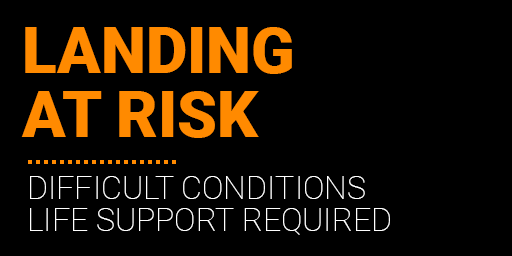
<style>
.page{position:relative;width:512px;height:256px;background:#000000}
.page>*{position:absolute;margin:0}
.t1{font:64px/32px "Roboto-Black";color:#ff8a00;text-transform:uppercase}
.t2{font:32px/32px "Roboto-Thin";color:#ffffff;text-transform:uppercase}
</style>
<div class="page">
<p class="t1" style="left:21px;top:27px;width:271px;height:111px">LANDING<br><br>AT RISK</p>
<p class="t2" style="left:30px;top:176px;width:360px;height:59px">DIFFICULT CONDITIONS<br>LIFE SUPPORT REQUIRED</p>
</div>
